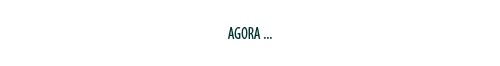
<style>
.page{position:relative;width:500px;height:66px;background:#ffffff}
.page>*{position:absolute;margin:0}
.t1{font:17px "MyriadPro-Cond";color:#033333;text-transform:uppercase;scale:0.9 1}
</style>
<div class="page">
<p class="t1" style="left:228px;top:27px;width:44px;height:12px">AGORA ...</p>
</div>
